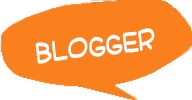
<style>
.page{position:relative;width:192px;height:100px;background:#fa7f1d}
.page>*{position:absolute;margin:0}
.t1{font:32px "SuplexmentaryComicNC";color:#ffffff;scale:0.8 1}
</style>
<div class="page">
<p class="t1" style="left:35px;top:28px;width:120px;height:36px;rotate:-6deg">BLOGGER</p>
</div>
